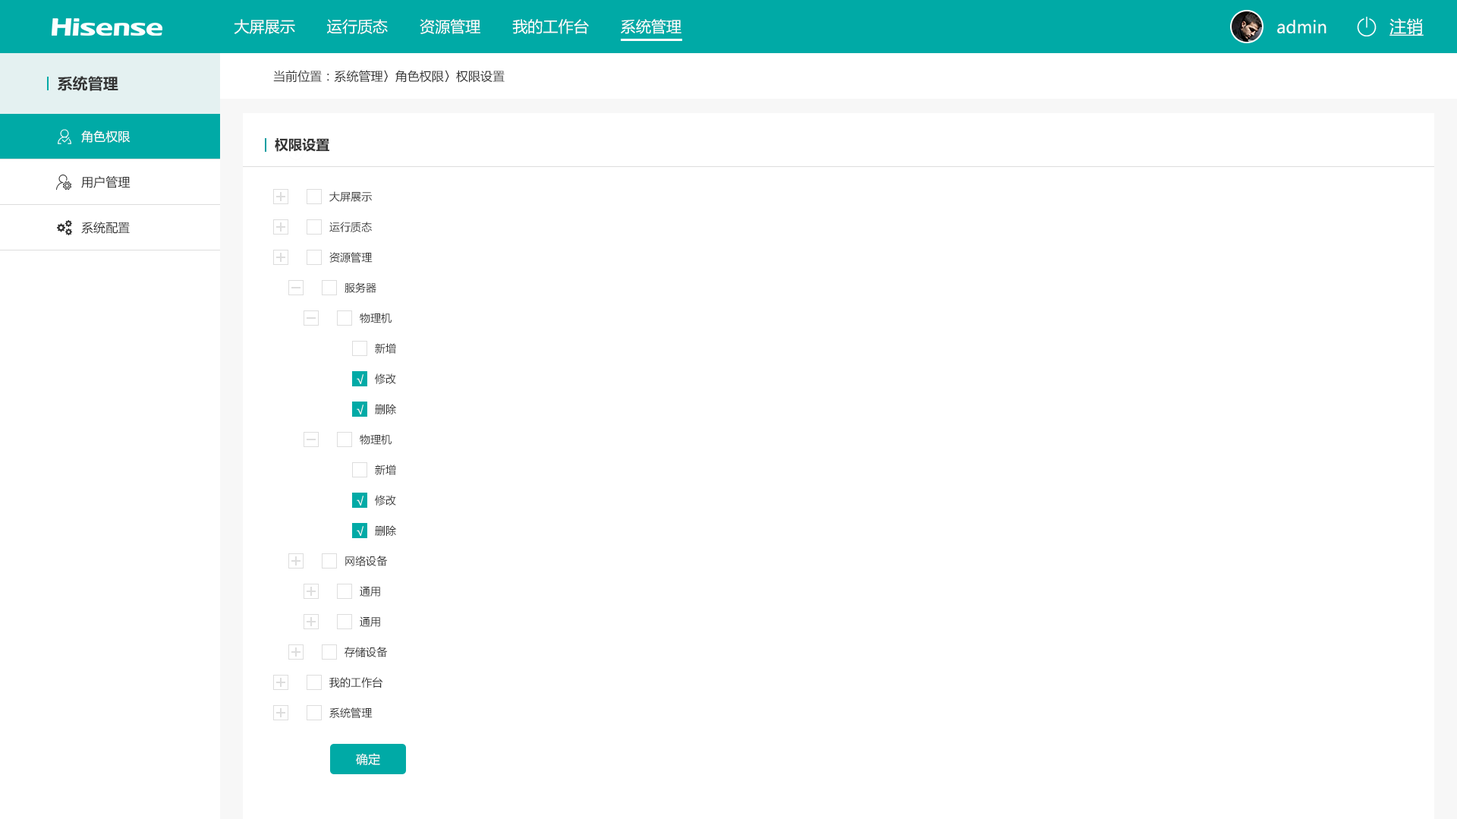
<style>
.page{position:relative;width:1457px;height:819px;background:#ffffff}
.page>*{position:absolute;margin:0}
.t1{font:15.2px "MicrosoftYaHei";letter-spacing:0.004em;color:#ffffff}
.t2{font:16.7px "MicrosoftYaHei";letter-spacing:0.004em;color:#ffffff}
.t3{font:16.7px "MicrosoftYaHei";letter-spacing:0.004em;color:#ffffff;text-decoration:underline}
.t4{font:15.2px "MicrosoftYaHei-Bold";letter-spacing:0.004em;color:#333333}
.t5{font:12.1px "MicrosoftYaHei";letter-spacing:0.004em;color:#333333}
.t6{font:12.1px "MicrosoftYaHei";letter-spacing:0.004em;color:#ffffff}
.t7{font:13.7px "MicrosoftYaHei-Bold";letter-spacing:0.004em;color:#333333}
.t8{font:10.6px "MicrosoftYaHei";letter-spacing:0.004em;color:#333333}
</style>
<div class="page">
<p class="t1" style="left:234px;top:19px;width:447px;height:15px">大屏展示       运行质态       资源管理       我的工作台       系统管理</p>
<p class="t2" style="left:1277px;top:20px;width:49px;height:13px">admin</p>
<p class="t3" style="left:1389px;top:18px;width:34px;height:18px">注销</p>
<p class="t4" style="left:57px;top:76px;width:61px;height:15px">系统管理</p>
<p class="t5" style="left:273px;top:70px;width:232px;height:13px">当前位置：系统管理〉角色权限〉权限设置</p>
<p class="t6" style="left:81px;top:130px;width:49px;height:13px">角色权限</p>
<p class="t7" style="left:275px;top:138px;width:54px;height:14px">权限设置</p>
<p class="t5" style="left:81px;top:176px;width:49px;height:12px">用户管理</p>
<p class="t8" style="left:329px;top:191px;width:43px;height:11px">大屏展示</p>
<p class="t5" style="left:81px;top:222px;width:49px;height:12px">系统配置</p>
<p class="t8" style="left:329px;top:222px;width:43px;height:10px">运行质态</p>
<p class="t8" style="left:329px;top:252px;width:44px;height:11px">资源管理</p>
<p class="t8" style="left:344px;top:282px;width:32px;height:11px">服务器</p>
<p class="t8" style="left:360px;top:313px;width:31px;height:10px">物理机</p>
<p class="t8" style="left:375px;top:343px;width:21px;height:11px">新增</p>
<p class="t6" style="left:357px;top:374px;width:6px;height:10px">√</p>
<p class="t8" style="left:375px;top:373px;width:21px;height:11px">修改</p>
<p class="t6" style="left:357px;top:404px;width:6px;height:10px">√</p>
<p class="t8" style="left:375px;top:404px;width:21px;height:10px">删除</p>
<p class="t8" style="left:360px;top:434px;width:31px;height:11px">物理机</p>
<p class="t8" style="left:375px;top:464px;width:21px;height:11px">新增</p>
<p class="t6" style="left:357px;top:495px;width:6px;height:10px">√</p>
<p class="t8" style="left:375px;top:495px;width:21px;height:10px">修改</p>
<p class="t6" style="left:357px;top:526px;width:6px;height:10px">√</p>
<p class="t8" style="left:375px;top:525px;width:21px;height:11px">删除</p>
<p class="t8" style="left:345px;top:555px;width:43px;height:11px">网络设备</p>
<p class="t8" style="left:360px;top:586px;width:20px;height:10px">通用</p>
<p class="t8" style="left:360px;top:616px;width:20px;height:11px">通用</p>
<p class="t8" style="left:344px;top:646px;width:44px;height:11px">存储设备</p>
<p class="t8" style="left:329px;top:677px;width:54px;height:10px">我的工作台</p>
<p class="t8" style="left:329px;top:707px;width:44px;height:11px">系统管理</p>
<p class="t6" style="left:356px;top:753px;width:24px;height:13px">确定</p>
</div>
